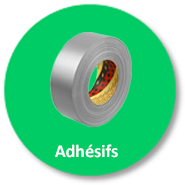
<style>
.page{position:relative;width:185px;height:185px;background:#00cc66}
.page>*{position:absolute;margin:0}
.t1{font:18px "Calibri-Bold";color:#ffffff}
</style>
<div class="page">
<p class="t1" style="left:55px;top:144px;width:63px;height:14px">Adhésifs</p>
</div>
